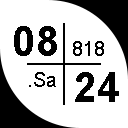
<style>
.page{position:relative;width:128px;height:128px;background:#ffffff}
.page>*{position:absolute;margin:0}
.t1{font:42px "Arial-BoldMT";color:#000000}
.t2{font:20px "ArialMT";color:#000000}
.t3{font:42px "Arial-BoldMT";color:#010101}
</style>
<div class="page">
<p class="t1" style="left:14px;top:26px;width:43px;height:30px">08</p>
<p class="t2" style="left:73px;top:41px;width:31px;height:15px">818</p>
<p class="t2" style="left:29px;top:72px;width:27px;height:15px">.Sa</p>
<p class="t3" style="left:75px;top:72px;width:44px;height:30px">24</p>
</div>
